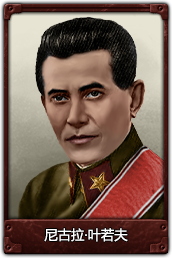
<style>
.page{position:relative;width:172px;height:258px}
.page>*{position:absolute;margin:0}
.t1{font:13.3px "MicrosoftYaHei";color:#ffffff}
</style>
<div class="page">
<p class="t1" style="left:44px;top:228px;width:84px;height:14px">尼古拉·叶若夫</p>
</div>
